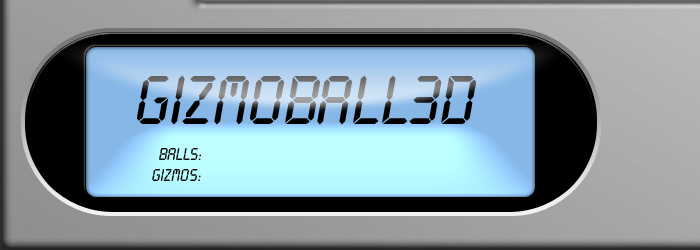
<style>
.page{position:relative;width:700px;height:250px}
.page>*{position:absolute;margin:0}
.t1{font:72px "LcdD"}
.t2{font:18px "LcdD";color:#000000}
</style>
<div class="page">
<p class="t1" style="left:137px;top:75px;width:339px;height:50px">GIZMOBALL3D</p>
<p class="t2" style="left:159px;top:148px;width:42px;height:12px">Balls:</p>
<p class="t2" style="left:152px;top:169px;width:49px;height:12px">Gizmos:</p>
</div>
